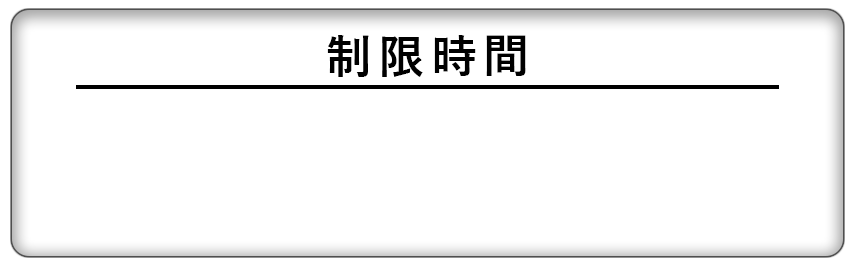
<style>
.page{position:relative;width:853px;height:266px;background:#ffffff}
.page>*{position:absolute;margin:0}
.t1{font:46px "YuGothic-Bold";letter-spacing:0.14em;color:#000000}
</style>
<div class="page">
<p class="t1" style="left:327px;top:35px;width:199px;height:42px">制限時間</p>
</div>
